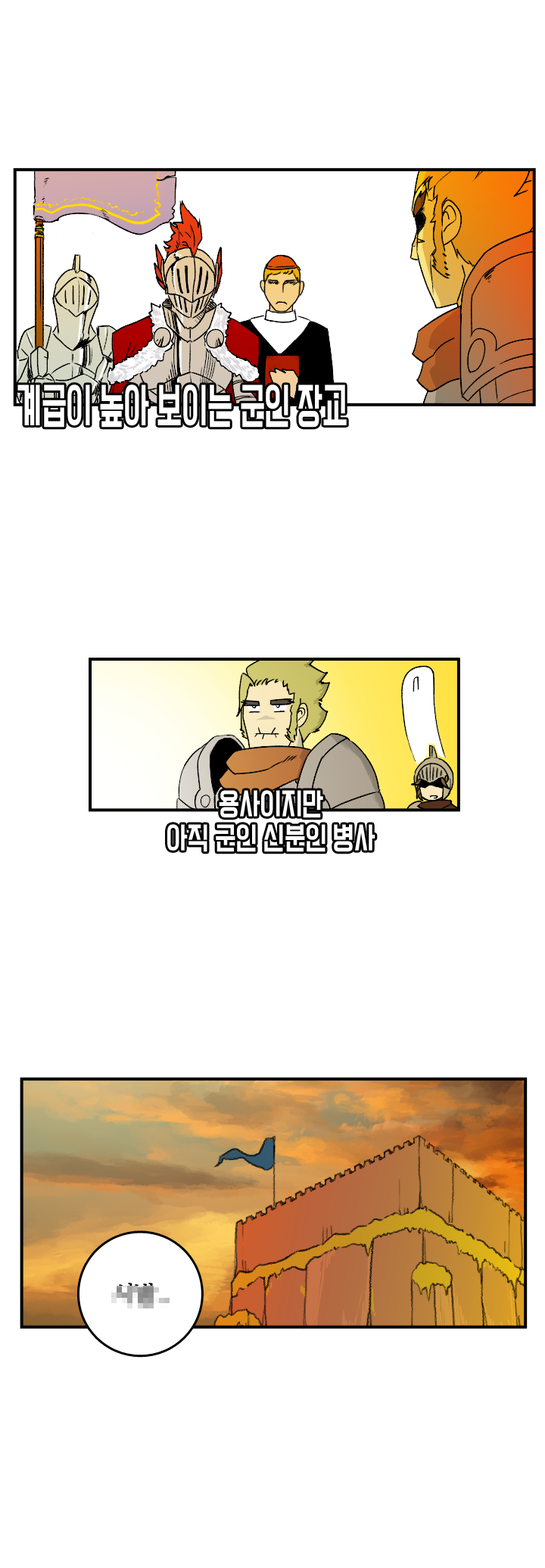
<style>
.page{position:relative;width:545px;height:1568px;background:#ffffff}
.page>*{position:absolute;margin:0}
.t1{font:44.8px "TTComsetakR";color:#ffffff;scale:0.62 1}
.t2{font:28.7px "TTComsetakR";color:#ffffff;scale:0.82 1}
</style>
<div class="page">
<p class="t1" style="left:17px;top:384px;width:330px;height:44px">계급이 높아 보이는 군인 장교</p>
<p class="t2" style="left:167px;top:790px;width:208px;height:62px;text-align:center">용사이지만<br>아직 군인 신분인 병사</p>
</div>
